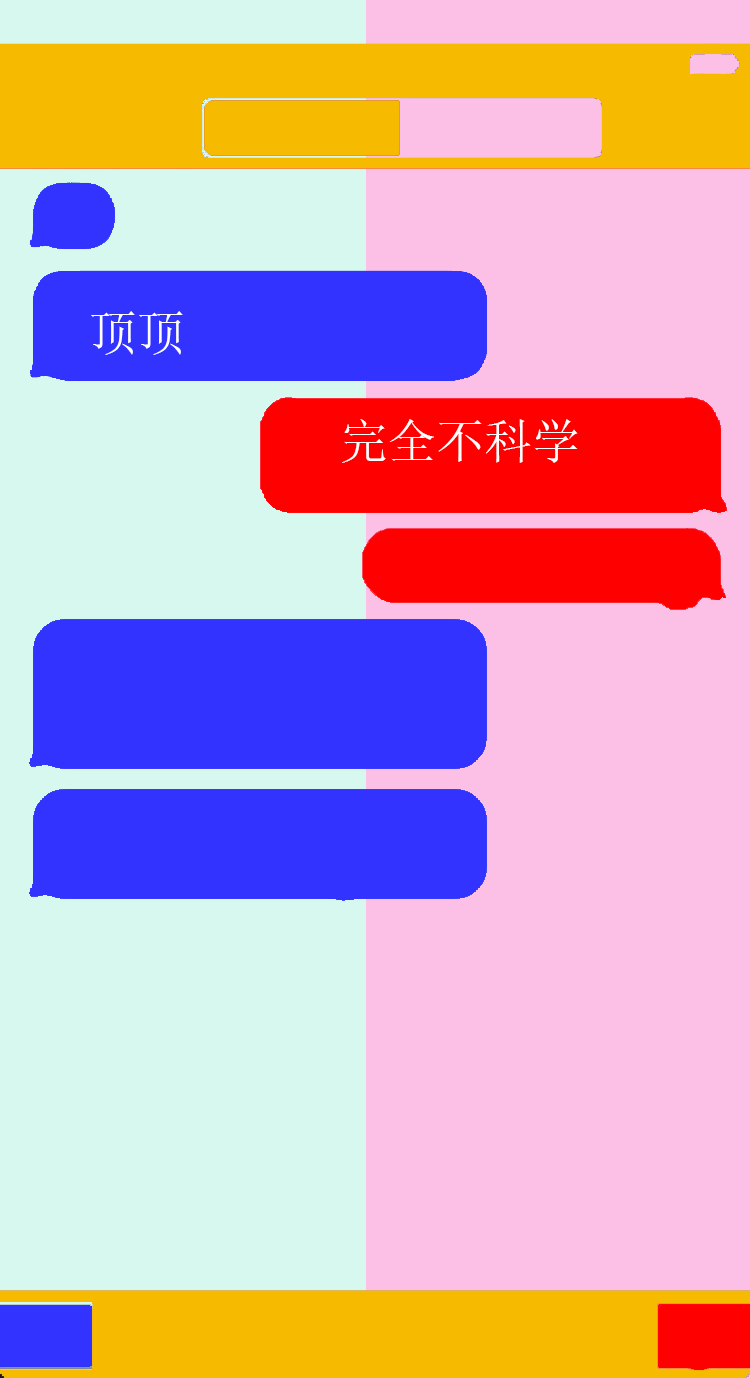
<style>
.page{position:relative;width:750px;height:1378px;background:#fcc0e6}
.page>*{position:absolute;margin:0}
.t1{font:48px "SimSun";color:#ffffff}
</style>
<div class="page">
<p class="t1" style="left:91px;top:311px;width:92px;height:44px">顶顶</p>
<p class="t1" style="left:342px;top:419px;width:236px;height:44px">完全不科学</p>
</div>
